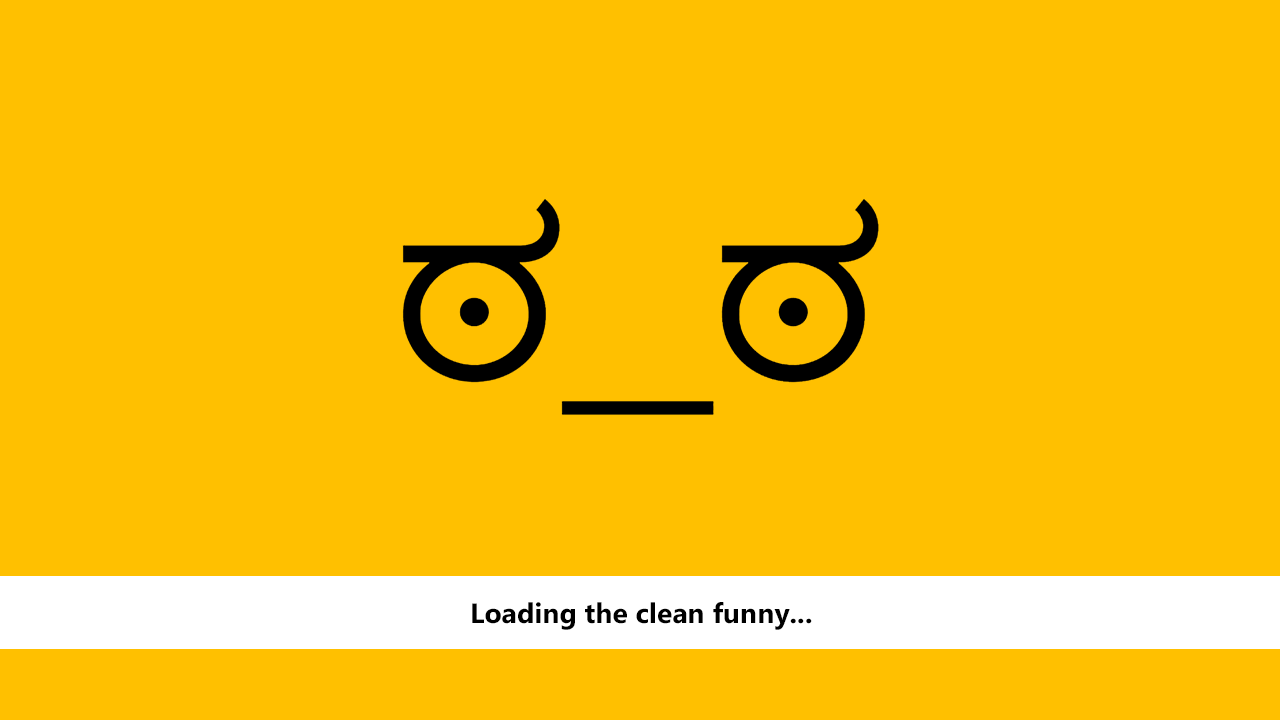
<style>
.page{position:relative;width:1280px;height:720px;background:#ffc000}
.page>*{position:absolute;margin:0}
.t1{font:28.1px "MicrosoftNewTaiLue-Bold";color:#000000}
</style>
<div class="page">
<p class="t1" style="left:472px;top:602px;width:340px;height:28px">Loading the clean funny...</p>
</div>
